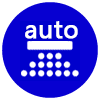
<style>
.page{position:relative;width:100px;height:100px;background:#ffffff}
.page>*{position:absolute;margin:0}
.t1{font:24px "MicrosoftYaHei";color:#ffffff;font-weight:bold}
</style>
<div class="page">
<p class="t1" style="left:25px;top:21px;width:53px;height:18px">auto</p>
</div>
